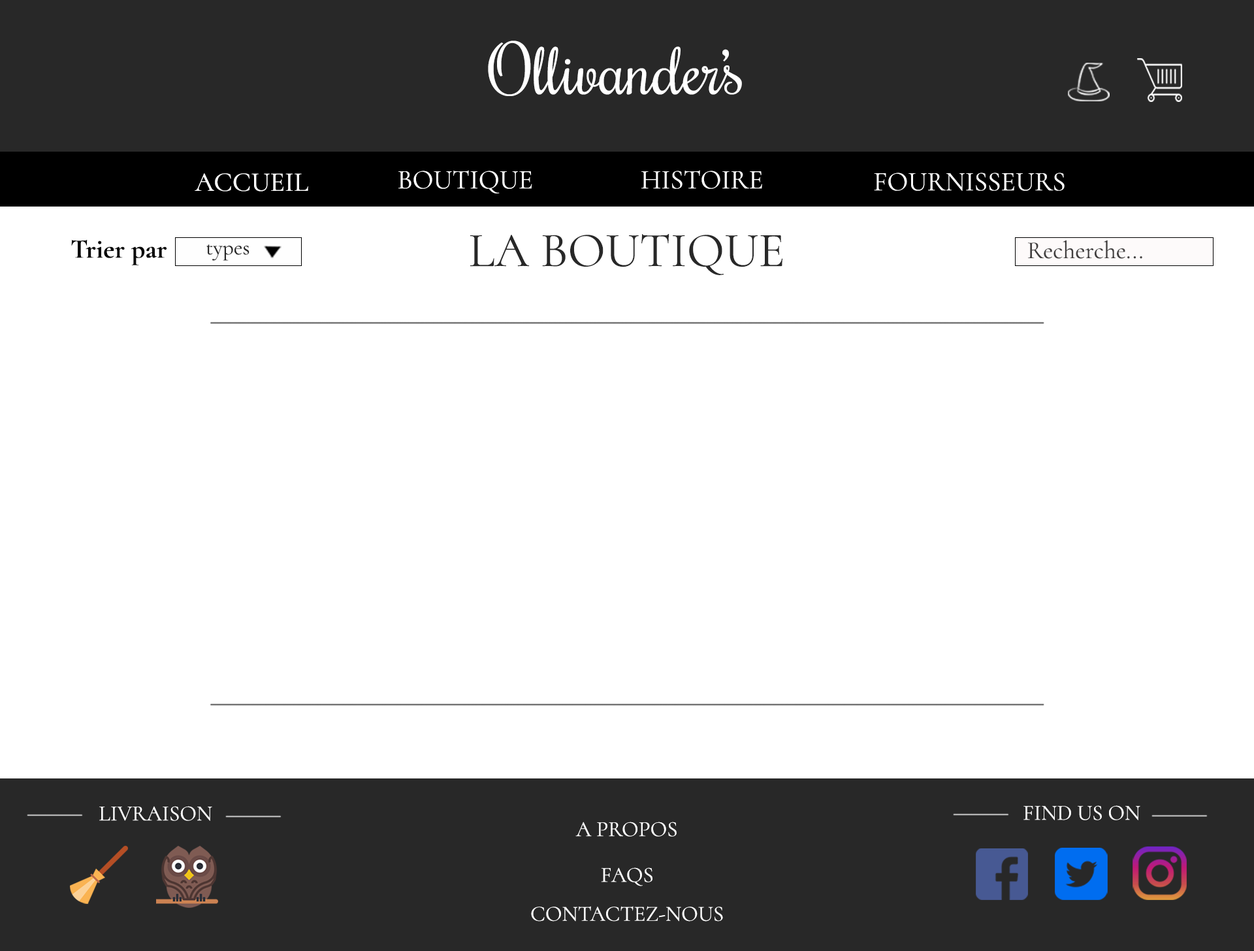
<style>
.page{position:relative;width:1254px;height:951px;background:#ffffff}
.page>*{position:absolute;margin:0}
.t1{font:65.3px "Rochester-Regular";color:#ffffff}
.t2{font:27.2px "CormorantGaramond-Medium";color:#ffffff}
.t3{font:27.2px "CormorantGaramond-Regular";color:#ffffff}
.t4{font:49px "CormorantGaramond-Regular";color:#282828}
.t5{font:27.2px "CormorantGaramond-Bold";color:#070707}
.t6{font:21.8px "CormorantGaramond-Regular";color:#282828}
.t7{font:24.5px "CormorantGaramond-Regular";color:#413f3f}
.t8{font:21.8px "CormorantGaramond-Regular";color:#ffffff}
</style>
<div class="page">
<p class="t1" style="left:488px;top:41px;width:254px;height:55px">Ollivander’s</p>
<p class="t2" style="left:195px;top:173px;width:113px;height:18px">ACCUEIL</p>
<p class="t3" style="left:399px;top:170px;width:133px;height:23px">BOUTIQUE</p>
<p class="t3" style="left:642px;top:170px;width:120px;height:19px">HISTOIRE</p>
<p class="t3" style="left:874px;top:172px;width:191px;height:19px">FOURNISSEURS</p>
<p class="t4" style="left:470px;top:233px;width:313px;height:42px">LA BOUTIQUE</p>
<p class="t5" style="left:71px;top:239px;width:96px;height:26px">Trier par</p>
<p class="t6" style="left:206px;top:244px;width:44px;height:17px">types</p>
<p class="t7" style="left:1028px;top:240px;width:115px;height:19px">Recherche...</p>
<p class="t8" style="left:99px;top:806px;width:113px;height:15px">LIVRAISON</p>
<p class="t8" style="left:1024px;top:805px;width:117px;height:15px">FIND US ON</p>
<p class="t8" style="left:576px;top:821px;width:101px;height:15px">A PROPOS</p>
<p class="t8" style="left:601px;top:867px;width:52px;height:19px">FAQS</p>
<p class="t8" style="left:531px;top:906px;width:192px;height:15px">CONTACTEZ-NOUS</p>
</div>
